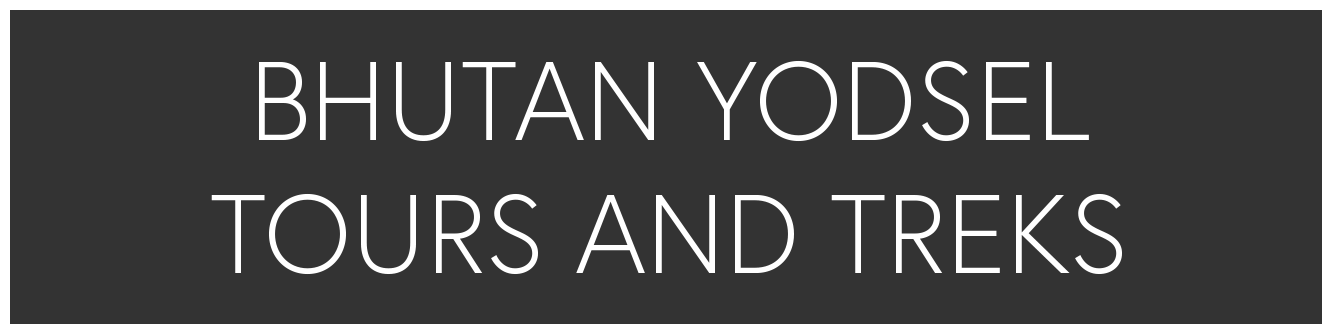
<style>
.page{position:relative;width:1333px;height:333px;background:#333333}
.page>*{position:absolute;margin:0}
.t1{font:111.1px "Europa-Light";color:#ffffff;text-transform:uppercase}
</style>
<div class="page">
<p class="t1" style="left:211px;top:60px;width:911px;height:215px;text-align:center">BHUtAN YODSEL<br>TOURS AND TREKS</p>
</div>
